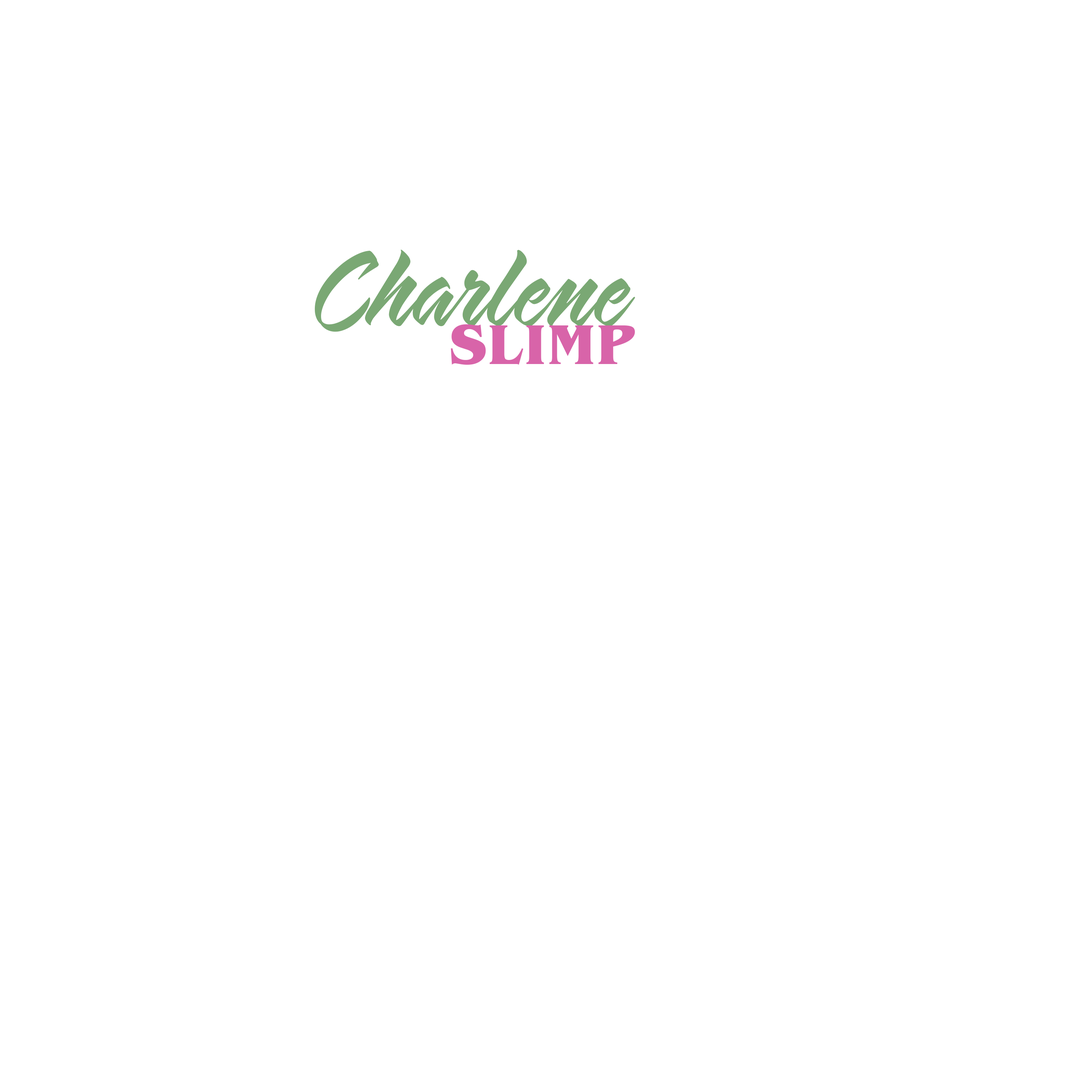
<style>
.page{position:relative;width:1092px;height:1092px;background:#ffffff}
.page>*{position:absolute;margin:0}
.t1{font:126px "SarahScript-Regular";color:#7aa874}
.t2{font:57.7px "BenguiatITCbyBT-Bold";color:#d864a9;font-variant:small-caps}
</style>
<div class="page">
<p class="t1" style="left:314px;top:249px;width:321px;height:83px">Charlene</p>
<p class="t2" style="left:451px;top:324px;width:184px;height:41px">SLIMP</p>
</div>
